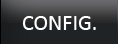
<style>
.page{position:relative;width:118px;height:44px;background:#1f2326}
.page>*{position:absolute;margin:0}
.t1{font:22px "Calibri";color:#ffffff}
</style>
<div class="page">
<p class="t1" style="left:22px;top:16px;width:74px;height:14px">CONFIG.</p>
</div>
